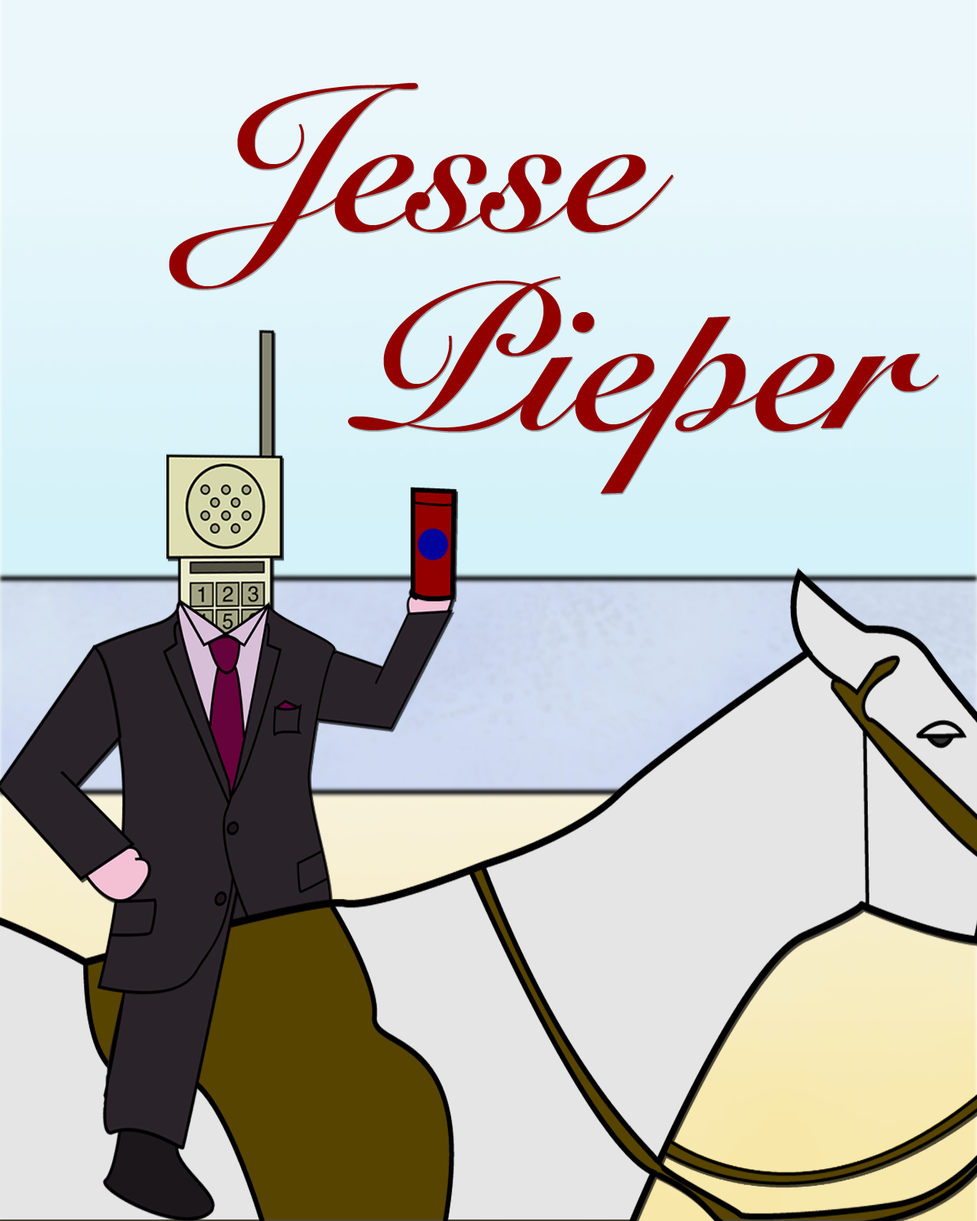
<style>
.page{position:relative;width:977px;height:1221px}
.page>*{position:absolute;margin:0}
.t1{font:202px/199px "SnellRoundhand-Bold";color:#930000}
</style>
<div class="page">
<p class="t1" style="left:169px;top:82px;width:770px;height:412px;text-align:center">Jesse <br>          Pieper</p>
</div>
